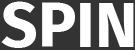
<style>
.page{position:relative;width:135px;height:50px;background:#ffffff}
.page>*{position:absolute;margin:0}
.t1{font:64px "FiraSans-Bold";color:#ffffff}
</style>
<div class="page">
<p class="t1" style="left:1px;top:1px;width:133px;height:47px">SPIN</p>
</div>
